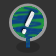
<style>
.page{position:relative;width:56px;height:56px;background:#333333}
.page>*{position:absolute;margin:0}
.t1{font:30px "FilbertBrush-PERSONALUSEONLY";color:#ffffff}
</style>
<div class="page">
<p class="t1" style="left:22px;top:11px;width:13px;height:23px">!</p>
</div>
